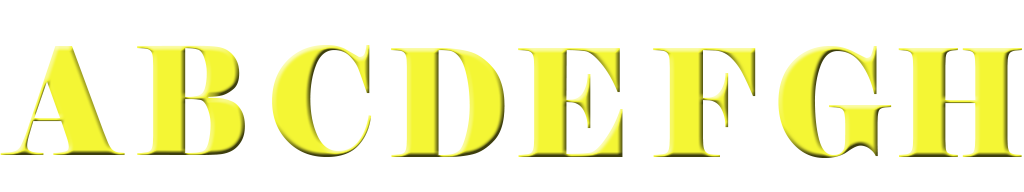
<style>
.page{position:relative;width:1024px;height:192px;background:#ffffff}
.page>*{position:absolute;margin:0}
.t1{font:150px "Elephant-Regular";color:#f4f634}
.t2{font:150.4px "Elephant-Regular";color:#f4f634;scale:0.88 1}
.t3{font:150.4px "Elephant-Regular";color:#f4f634;scale:0.92 1}
.t4{font:150.4px "Elephant-Regular";color:#f4f634;scale:0.86 1}
.t5{font:150.4px "Elephant-Regular";scale:0.88 1}
.t6{font:150.4px "Elephant-Regular";color:#f4f634;scale:0.91 1}
</style>
<div class="page">
<p class="t1" style="left:0px;top:46px;width:125px;height:109px">A</p>
<p class="t2" style="left:137px;top:45px;width:108px;height:110px">B</p>
<p class="t3" style="left:272px;top:45px;width:100px;height:112px">C</p>
<p class="t4" style="left:391px;top:48px;width:114px;height:109px">D</p>
<p class="t5" style="left:518px;top:48px;width:105px;height:109px">E</p>
<p class="t6" style="left:653px;top:48px;width:103px;height:109px">F</p>
<p class="t2" style="left:778px;top:46px;width:114px;height:112px">G</p>
<p class="t2" style="left:898px;top:48px;width:124px;height:109px">H</p>
</div>
